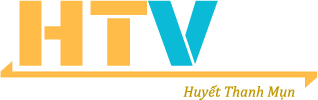
<style>
.page{position:relative;width:318px;height:100px;background:#ffffff}
.page>*{position:absolute;margin:0}
.t1{font:100px "BlackOpsOne-Regular";color:#ffbc49}
.t2{font:100px "BlackOpsOne-Regular";color:#0abad6}
.t3{font:15px "Cambria-Italic";color:#c19800}
</style>
<div class="page">
<p class="t1" style="left:19px;top:0px;width:199px;height:66px">HT<span class="t2">V</span></p>
<p class="t3" style="left:183px;top:85px;width:112px;height:15px">Huyết Thanh Mụn</p>
</div>
